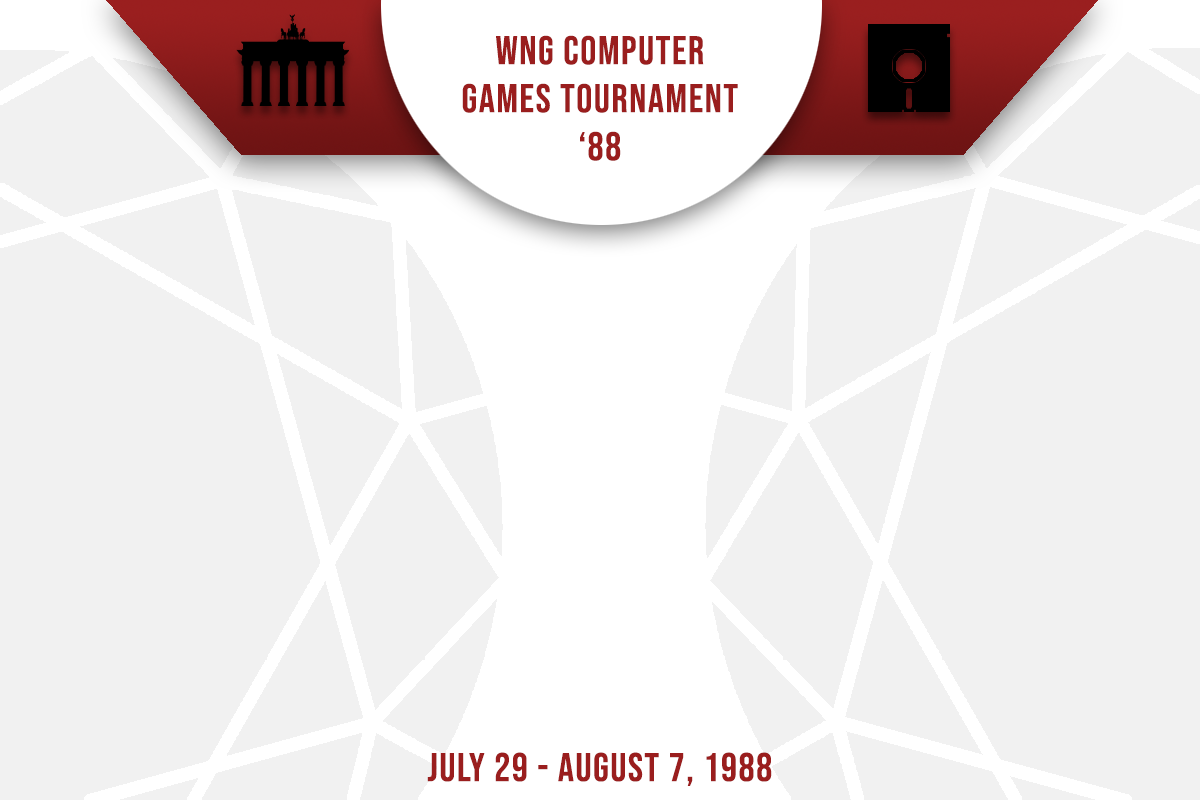
<style>
.page{position:relative;width:1200px;height:800px;background:#f1f1f1}
.page>*{position:absolute;margin:0}
.t1{font:40px "BebasNeue-Regular";letter-spacing:0.04em;color:#9a1e1e}
</style>
<div class="page">
<p class="t1" style="left:462px;top:35px;width:276px;height:126px;text-align:center">WNG COMPUTER <br>GAMES TOURNAMENT<br>‘88</p>
<p class="t1" style="left:427px;top:752px;width:345px;height:34px">JULY 29 - AUGUST 7, 1988</p>
</div>
